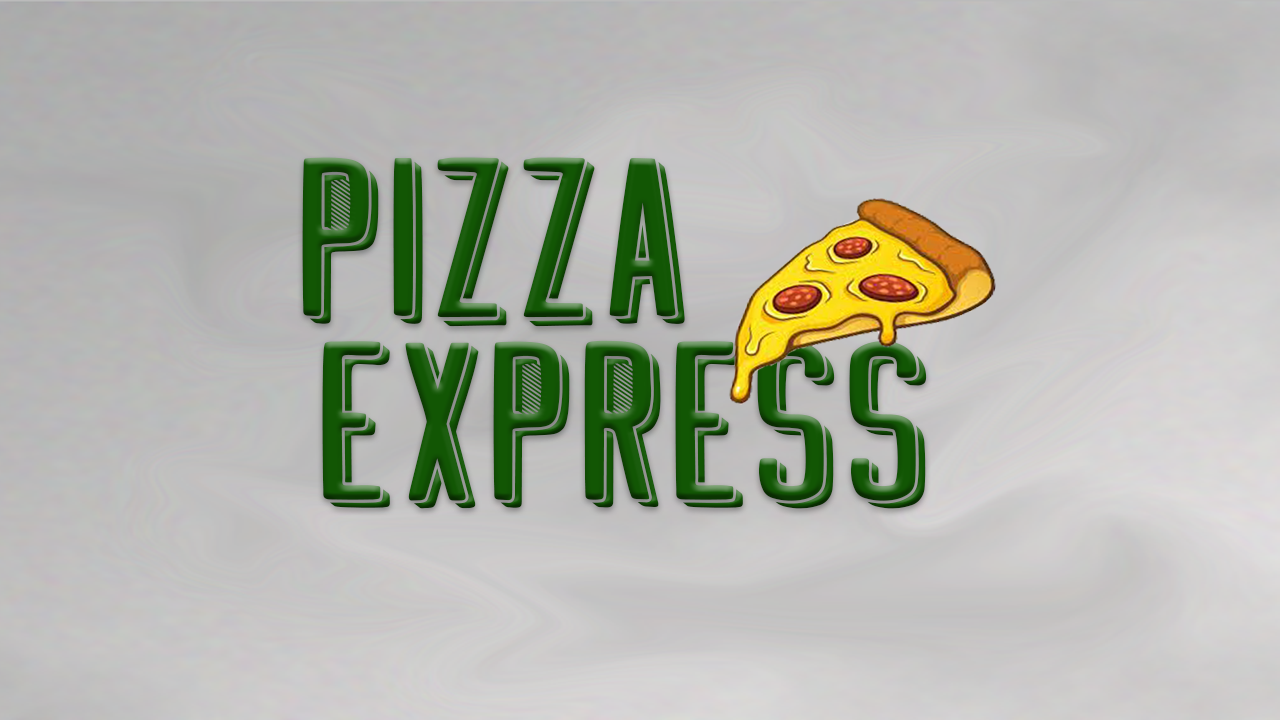
<style>
.page{position:relative;width:1280px;height:720px}
.page>*{position:absolute;margin:0}
.t1{font:250px "GREETHINGBLOCKSHADOWLINE";color:#125604}
</style>
<div class="page">
<p class="t1" style="left:302px;top:157px;width:383px;height:170px">PIZZA</p>
<p class="t1" style="left:322px;top:340px;width:605px;height:169px">EXPRESS</p>
</div>
